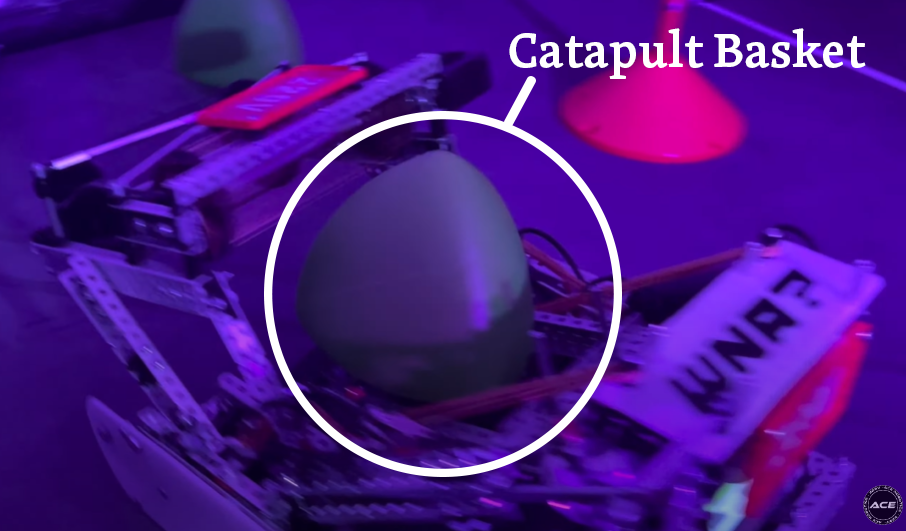
<style>
.page{position:relative;width:906px;height:531px}
.page>*{position:absolute;margin:0}
.t1{font:50px "SkolarLatin-Semibold";color:#ffffff}
</style>
<div class="page">
<p class="t1" style="left:509px;top:28px;width:357px;height:51px">Catapult Basket</p>
</div>
